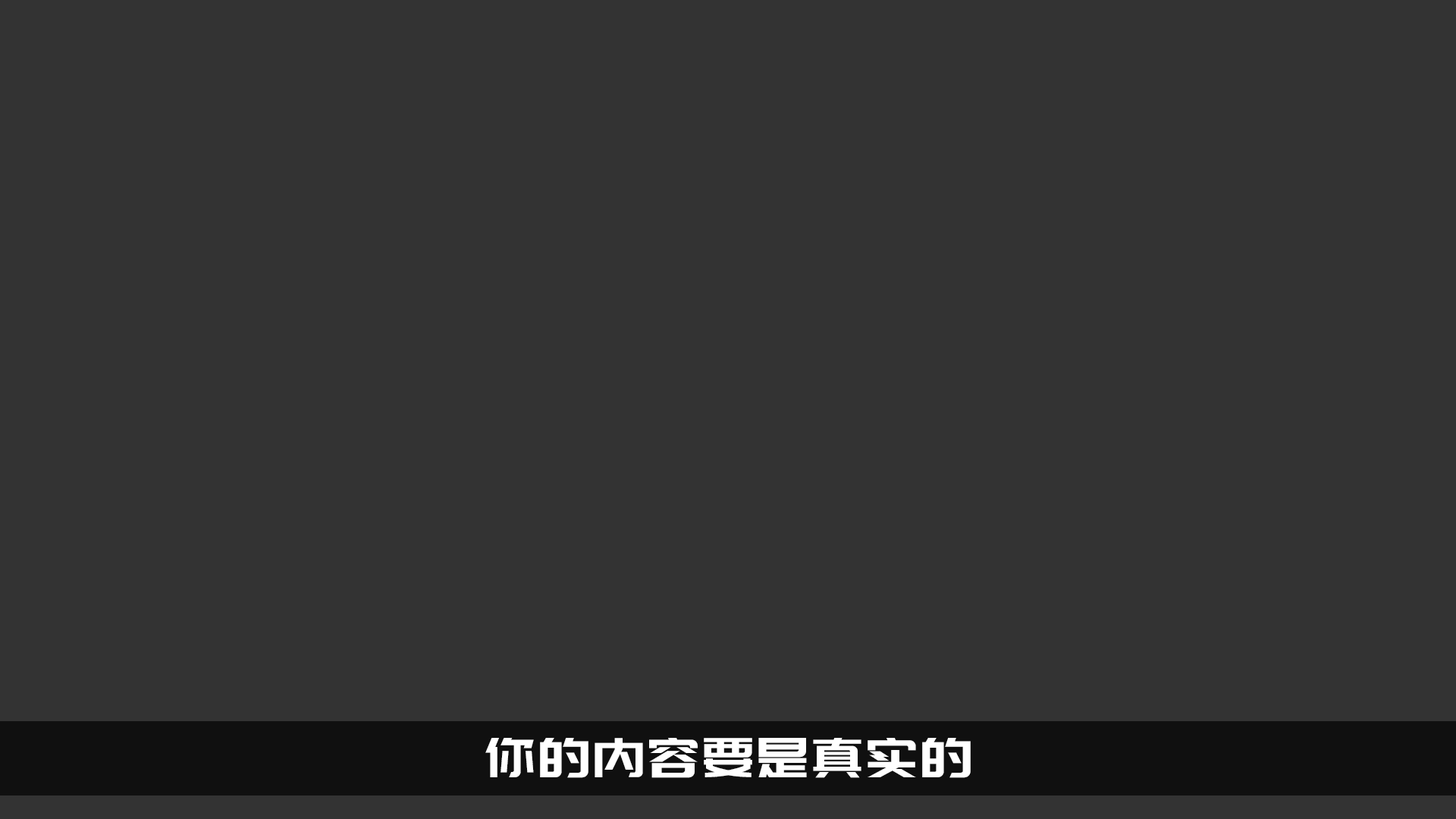
<style>
.page{position:relative;width:1456px;height:819px;background:#333333}
.page>*{position:absolute;margin:0}
.t1{font:54.6px "PangMenZhengDao-3";color:#ffffff}
</style>
<div class="page">
<p class="t1" style="left:485px;top:738px;width:486px;height:40px">你的内容要是真实的</p>
</div>
